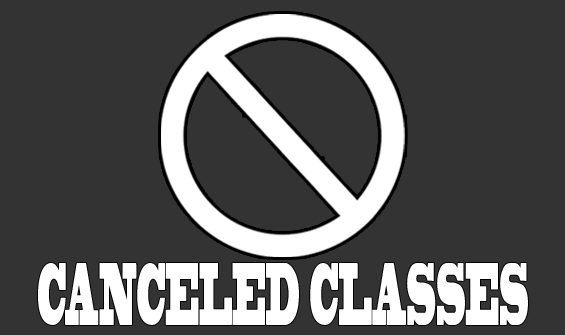
<style>
.page{position:relative;width:565px;height:335px;background:#333333}
.page>*{position:absolute;margin:0}
.t1{font:83.3px "BlackoakStd";color:#ffffff;scale:0.22 1}
</style>
<div class="page">
<p class="t1" style="left:38px;top:263px;width:490px;height:62px">CANCELED CLASSES</p>
</div>
